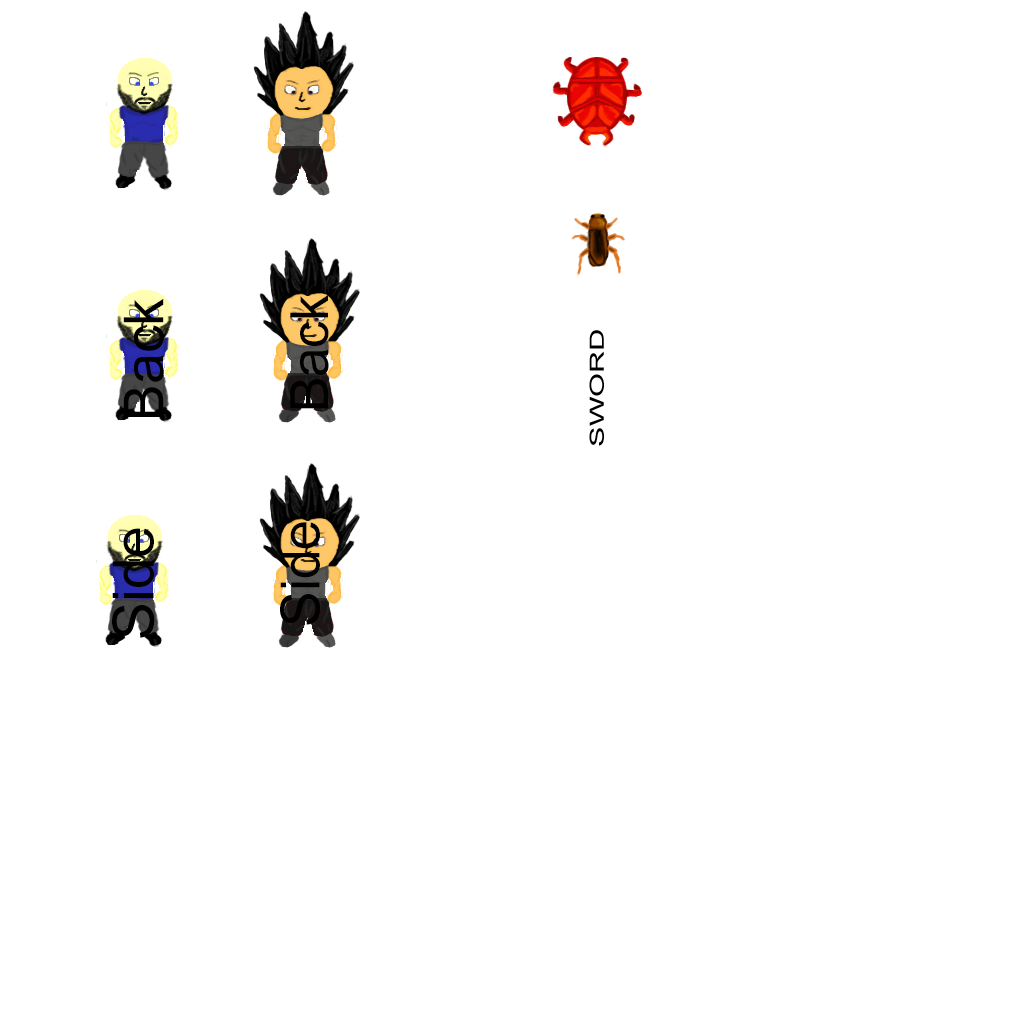
<style>
.page{position:relative;width:1024px;height:1024px;background:#ffffff}
.page>*{position:absolute;margin:0}
.t1{font:55px "ArialMT";color:#000000}
.t2{font:52.4px "ArialMT";color:#000000}
.t3{font:19.4px "ArialMT";color:#000000;scale:1.58 1}
.t4{font:56.6px "ArialMT";color:#000000}
.t5{font:54.1px "ArialMT";color:#000000}
</style>
<div class="page">
<p class="t1" style="left:123px;top:298px;width:41px;height:119px;rotate:-90deg">Back</p>
<p class="t2" style="left:290px;top:295px;width:39px;height:114px;rotate:-90deg">Back</p>
<p class="t3" style="left:589px;top:330px;width:15px;height:116px;rotate:-90deg">SWORD</p>
<p class="t4" style="left:112px;top:528px;width:43px;height:110px;rotate:-90deg">Side</p>
<p class="t5" style="left:280px;top:522px;width:40px;height:103px;rotate:-90deg">Side</p>
</div>
